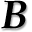
<style>
.page{position:relative;width:32px;height:32px;background:#ffffff}
.page>*{position:absolute;margin:0}
.t1{font:40px "BookAntiqua-BoldItalic";color:#000000}
</style>
<div class="page">
<p class="t1" style="left:1px;top:0px;width:26px;height:29px">B</p>
</div>
